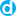
<style>
.page{position:relative;width:16px;height:16px;background:#ffffff}
.page>*{position:absolute;margin:0}
.t1{font:18.4px "CenturyGothic-Bold";letter-spacing:0.02em;color:#ffffff}
</style>
<div class="page">
<p class="t1" style="left:2px;top:1px;width:11px;height:13px">d</p>
</div>
